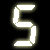
<style>
.page{position:relative;width:50px;height:50px;background:#000000}
.page>*{position:absolute;margin:0}
.t1{font:55px "LiquidCrystal";color:#ffffff}
</style>
<div class="page">
<p class="t1" style="left:13px;top:5px;width:23px;height:41px">5</p>
</div>
